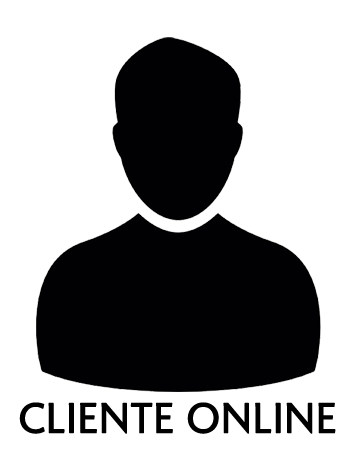
<style>
.page{position:relative;width:356px;height:474px;background:#ffffff}
.page>*{position:absolute;margin:0}
.t1{font:41.7px "CarandacheOfficeSans";color:#000000;font-weight:bold}
</style>
<div class="page">
<p class="t1" style="left:19px;top:402px;width:317px;height:32px">CLIENTE ONLINE</p>
</div>
